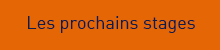
<style>
.page{position:relative;width:220px;height:50px;background:#e56605}
.page>*{position:absolute;margin:0}
.t1{font:18px "DINAlternate-Regular";color:#0c1d4b}
</style>
<div class="page">
<p class="t1" style="left:28px;top:16px;width:167px;height:17px">Les prochains stages</p>
</div>
